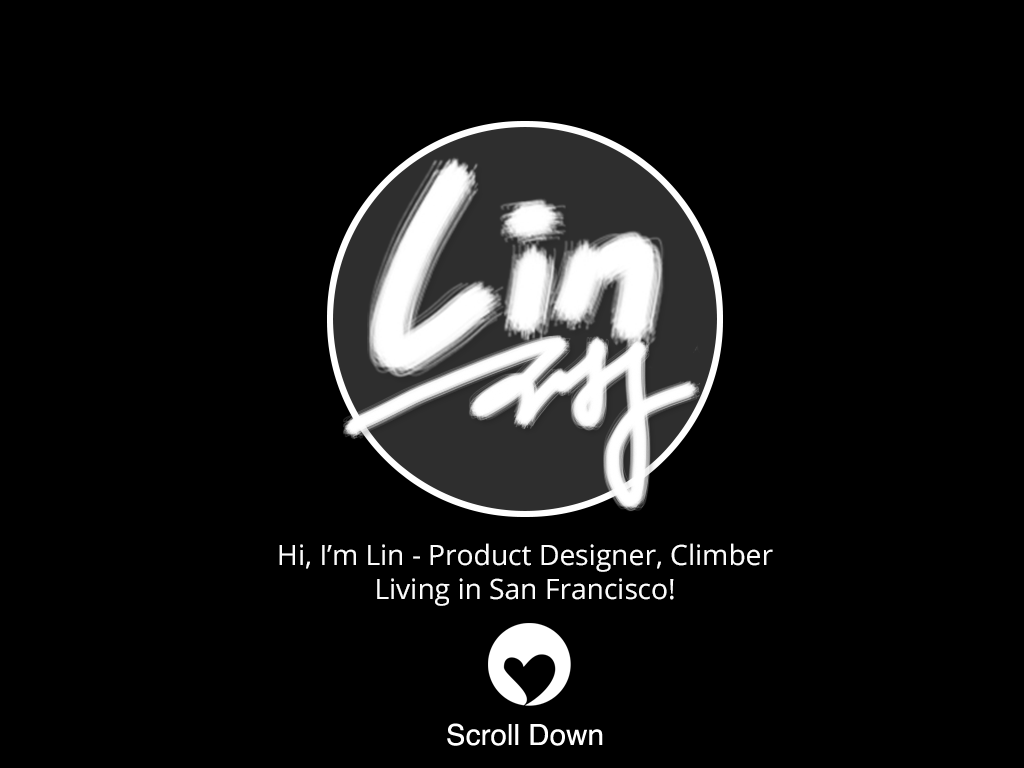
<style>
.page{position:relative;width:1024px;height:768px;background:#000000}
.page>*{position:absolute;margin:0}
.t1{font:28px "OpenSans";color:#fcfcfc}
</style>
<div class="page">
<p class="t1" style="left:279px;top:543px;width:494px;height:63px;text-align:center">Hi, I’m Lin - Product Designer, Climber<br>Living in San Francisco!</p>
</div>
